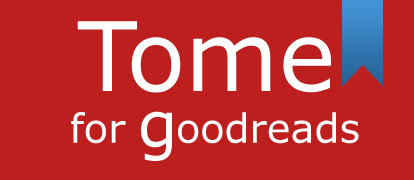
<style>
.page{position:relative;width:414px;height:180px;background:#bd1e1e}
.page>*{position:absolute;margin:0}
.t1{font:96px "Verdana";color:#ffffff}
.t2{font:40px "Verdana";color:#ffffff}
.t3{font:64px "Verdana";color:#ffffff}
</style>
<div class="page">
<p class="t1" style="left:77px;top:21px;width:254px;height:72px">Tome</p>
<p class="t2" style="left:71px;top:112px;width:288px;height:32px">for   oodreads</p>
<p class="t3" style="left:141px;top:111px;width:31px;height:50px">g</p>
</div>
